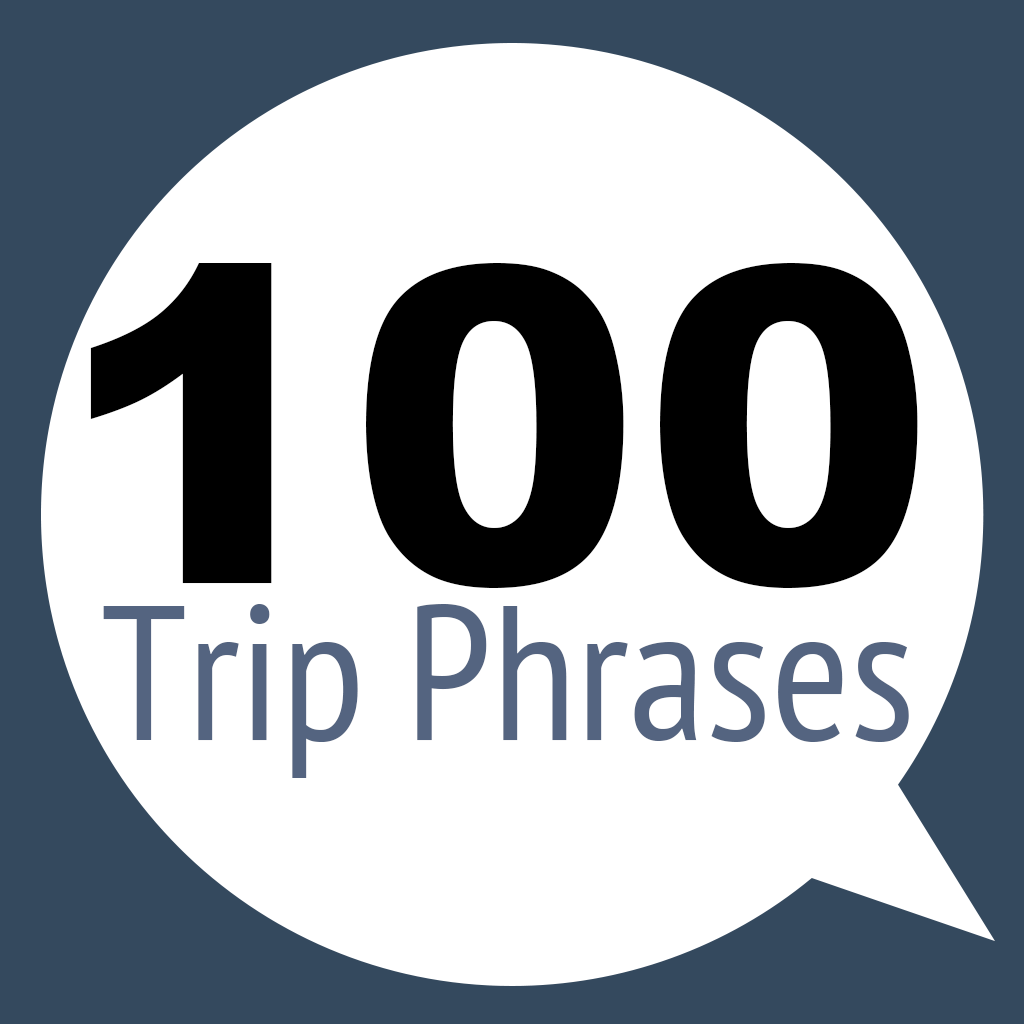
<style>
.page{position:relative;width:1024px;height:1024px;background:#ffffff}
.page>*{position:absolute;margin:0}
.t1{font:440px "Arial-Black";color:#000000}
.t2{font:192px "PTSans-Narrow";color:#546480}
</style>
<div class="page">
<p class="t1" style="left:90px;top:263px;width:828px;height:325px">100</p>
<p class="t2" style="left:103px;top:604px;width:806px;height:174px">Trip Phrases</p>
</div>
